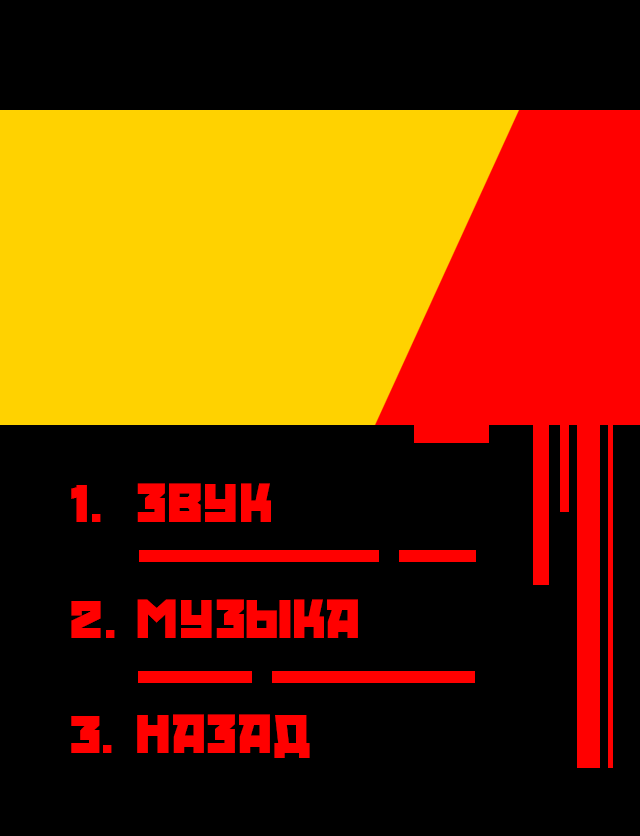
<style>
.page{position:relative;width:640px;height:836px;background:#000000}
.page>*{position:absolute;margin:0}
.t1{font:48px "RedOctober-Fat";color:#ff0000}
</style>
<div class="page">
<p class="t1" style="left:71px;top:485px;width:44px;height:268px">1.<br><br>2.<br><br>3.</p>
<p class="t1" style="left:137px;top:483px;width:221px;height:275px">звук<br><br>музыка<br><br>Назад</p>
</div>
